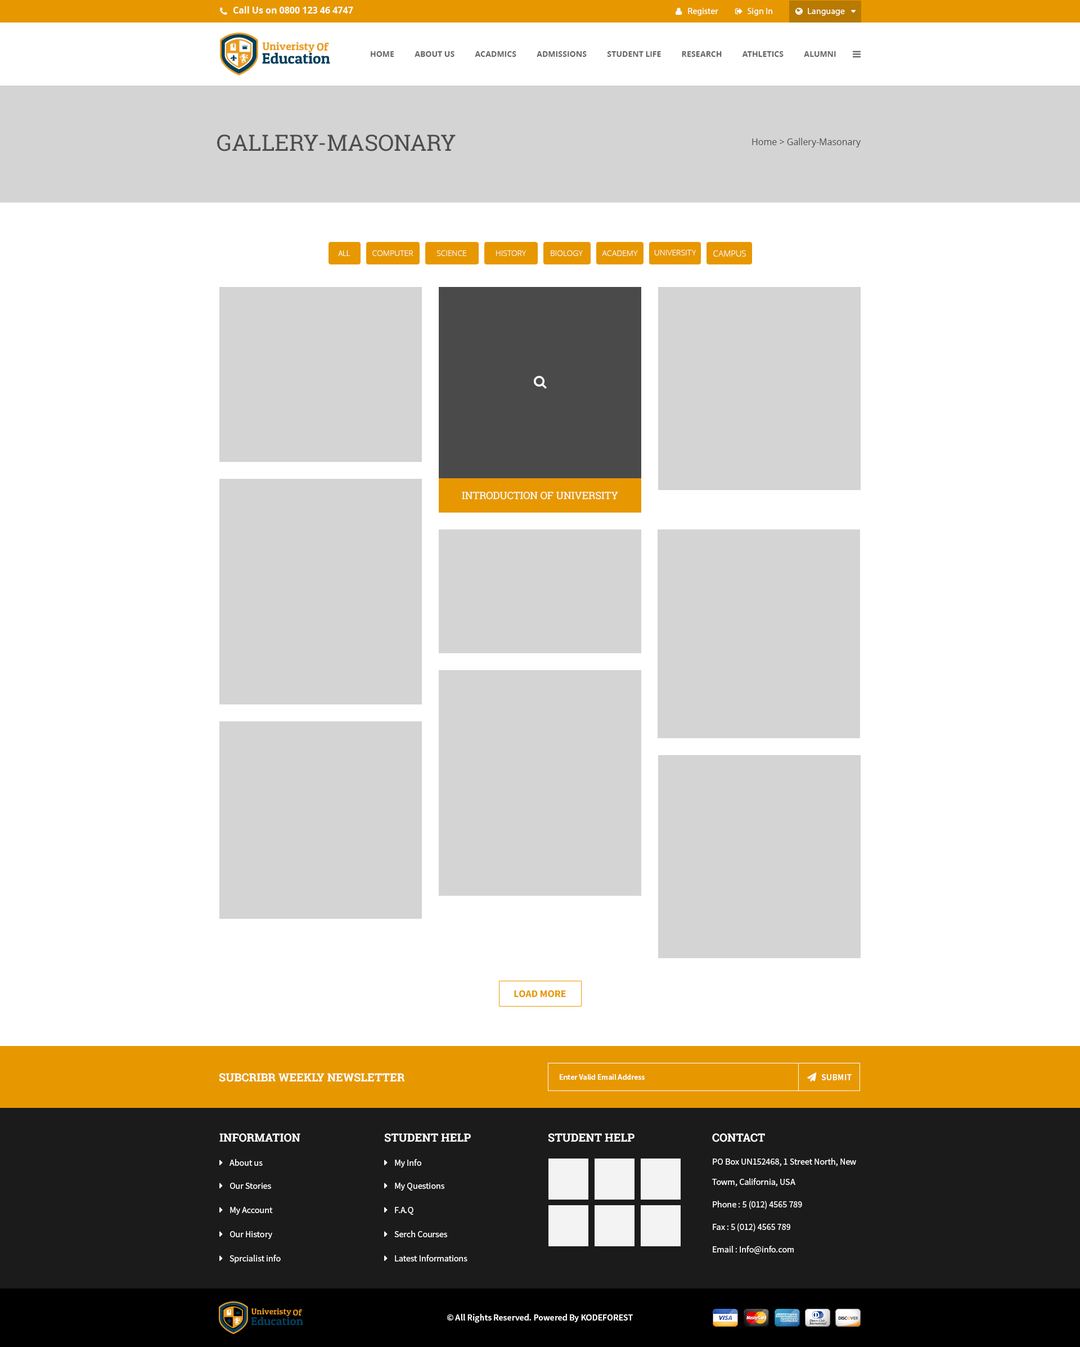
<style>
.page{position:relative;width:1080px;height:1347px;background:#ffffff}
.page>*{position:absolute;margin:0}
.t1{font:9px "OpenSans-Bold";color:#ffffff}
.t2{font:9px "MyriadPro-Regular";color:#ffffff}
.t3{font:7.9px "OpenSans-Bold";color:#666666;text-transform:uppercase}
.t4{font:22.5px "RobotoSlab-Regular";color:#4d4d4d;text-transform:uppercase}
.t5{font:9px "OpenSans";color:#4d4d4d}
.t6{font:7.9px "SourceSansPro-Light";color:#ffffff;text-transform:uppercase}
.t7{font:7.9px "OpenSans-Light";color:#ffffff;text-transform:uppercase}
.t8{font:8.4px "OpenSans-Light";color:#ffffff;text-transform:uppercase}
.t9{font:10.1px "RobotoSlab-Regular";color:#ffffff;text-transform:uppercase}
.t10{font:10.1px "SourceSansPro-Bold";color:#e79800;text-transform:uppercase}
.t11{font:11.2px "RobotoSlab-Bold";color:#ffffff;text-transform:uppercase}
.t12{font:7.9px "SourceSansPro-Semibold";color:#ffffff}
.t13{font:9px "SourceSansPro-Semibold";color:#ffffff}
.t14{font:9px/20.2px "SourceSansPro-Regular";color:#ffffff}
.t15{font:9px "SourceSansPro-Regular";color:#ffffff}
</style>
<div class="page">
<p class="t1" style="left:233px;top:6px;width:120px;height:8px">Call Us on 0800 123 46 4747</p>
<p class="t2" style="left:688px;top:8px;width:30px;height:8px">Register</p>
<p class="t2" style="left:748px;top:8px;width:24px;height:8px">Sign In</p>
<p class="t2" style="left:808px;top:8px;width:37px;height:8px">Language</p>
<p class="t3" style="left:371px;top:51px;width:465px;height:6px">Home          About Us          ACADMICS          ADMISSIONS          STUDENT LIFE          RESEARCH          ATHLETICS          ALUMNI</p>
<p class="t4" style="left:217px;top:134px;width:239px;height:17px">gallery-masonary</p>
<p class="t5" style="left:752px;top:138px;width:109px;height:9px">Home &gt; Gallery-Masonary</p>
<p class="t6" style="left:338px;top:250px;width:12px;height:6px">All</p>
<p class="t7" style="left:372px;top:250px;width:41px;height:6px">Computer</p>
<p class="t7" style="left:436px;top:250px;width:30px;height:6px">Science</p>
<p class="t7" style="left:496px;top:250px;width:30px;height:6px">History</p>
<p class="t7" style="left:551px;top:250px;width:32px;height:6px">Biology</p>
<p class="t7" style="left:602px;top:250px;width:36px;height:6px">Academy</p>
<p class="t7" style="left:654px;top:250px;width:42px;height:5px">University</p>
<p class="t8" style="left:713px;top:250px;width:33px;height:6px">Campus</p>
<p class="t9" style="left:462px;top:491px;width:156px;height:9px">Introduction of University</p>
<p class="t10" style="left:514px;top:990px;width:52px;height:7px">Load More</p>
<p class="t11" style="left:219px;top:1073px;width:185px;height:9px">subcribr weekly newsletter</p>
<p class="t12" style="left:560px;top:1074px;width:85px;height:5px">Enter Valid Email Address</p>
<p class="t13" style="left:821px;top:1074px;width:31px;height:6px">SUBMIT</p>
<p class="t11" style="left:219px;top:1133px;width:81px;height:9px">INFORMATION</p>
<p class="t11" style="left:385px;top:1133px;width:86px;height:9px">student help</p>
<p class="t11" style="left:548px;top:1133px;width:86px;height:9px">student help</p>
<p class="t11" style="left:712px;top:1133px;width:53px;height:9px">Contact</p>
<p class="t14" style="left:712px;top:1158px;width:144px;height:28px;text-align:right">PO Box UN152468, 1 Street North, New Towm, California, USA</p>
<p class="t15" style="left:230px;top:1159px;width:33px;height:7px">About us</p>
<p class="t15" style="left:395px;top:1159px;width:26px;height:8px">My Info</p>
<p class="t15" style="left:230px;top:1182px;width:41px;height:7px">Our Stories</p>
<p class="t15" style="left:395px;top:1182px;width:49px;height:8px">My Questions</p>
<p class="t15" style="left:713px;top:1200px;width:89px;height:9px">Phone : 5 (012) 4565 789</p>
<p class="t15" style="left:230px;top:1207px;width:43px;height:7px">My Account</p>
<p class="t15" style="left:395px;top:1207px;width:18px;height:7px">F.A.Q</p>
<p class="t15" style="left:713px;top:1223px;width:77px;height:8px">Fax : 5 (012) 4565 789</p>
<p class="t15" style="left:230px;top:1231px;width:42px;height:8px">Our History</p>
<p class="t15" style="left:394px;top:1230px;width:53px;height:7px">Serch Courses</p>
<p class="t15" style="left:713px;top:1245px;width:81px;height:9px">Email : Info@info.com</p>
<p class="t15" style="left:230px;top:1254px;width:51px;height:9px">Sprcialist info</p>
<p class="t15" style="left:395px;top:1254px;width:72px;height:7px">Latest Informations</p>
<p class="t13" style="left:447px;top:1313px;width:186px;height:9px">© All Rights Reserved. Powered By KODEFOREST</p>
</div>
